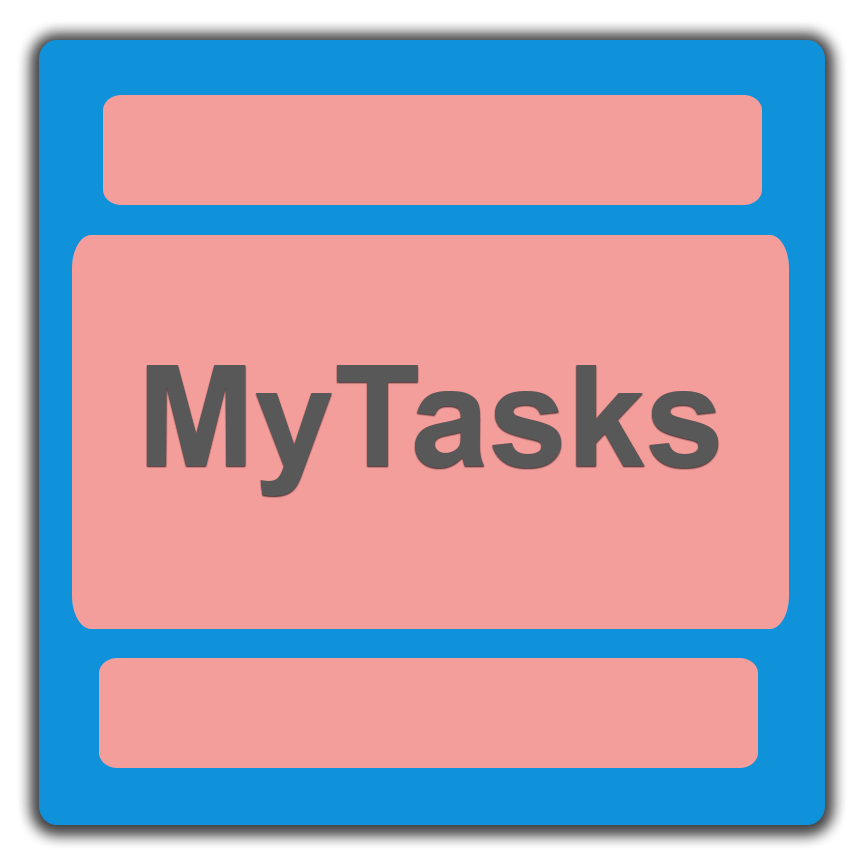
<style>
.page{position:relative;width:864px;height:864px;background:#f49e9c}
.page>*{position:absolute;margin:0}
.t1{font:141px "Arial-BoldMT";color:#585858}
</style>
<div class="page">
<p class="t1" style="left:146px;top:365px;width:573px;height:131px">MyTasks</p>
</div>
